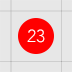
<style>
.page{position:relative;width:72px;height:72px;background:#e7e7e7}
.page>*{position:absolute;margin:0}
.t1{font:17.2px "Avenir-Light";color:#ffffff}
</style>
<div class="page">
<p class="t1" style="left:27px;top:29px;width:18px;height:14px">23</p>
</div>
